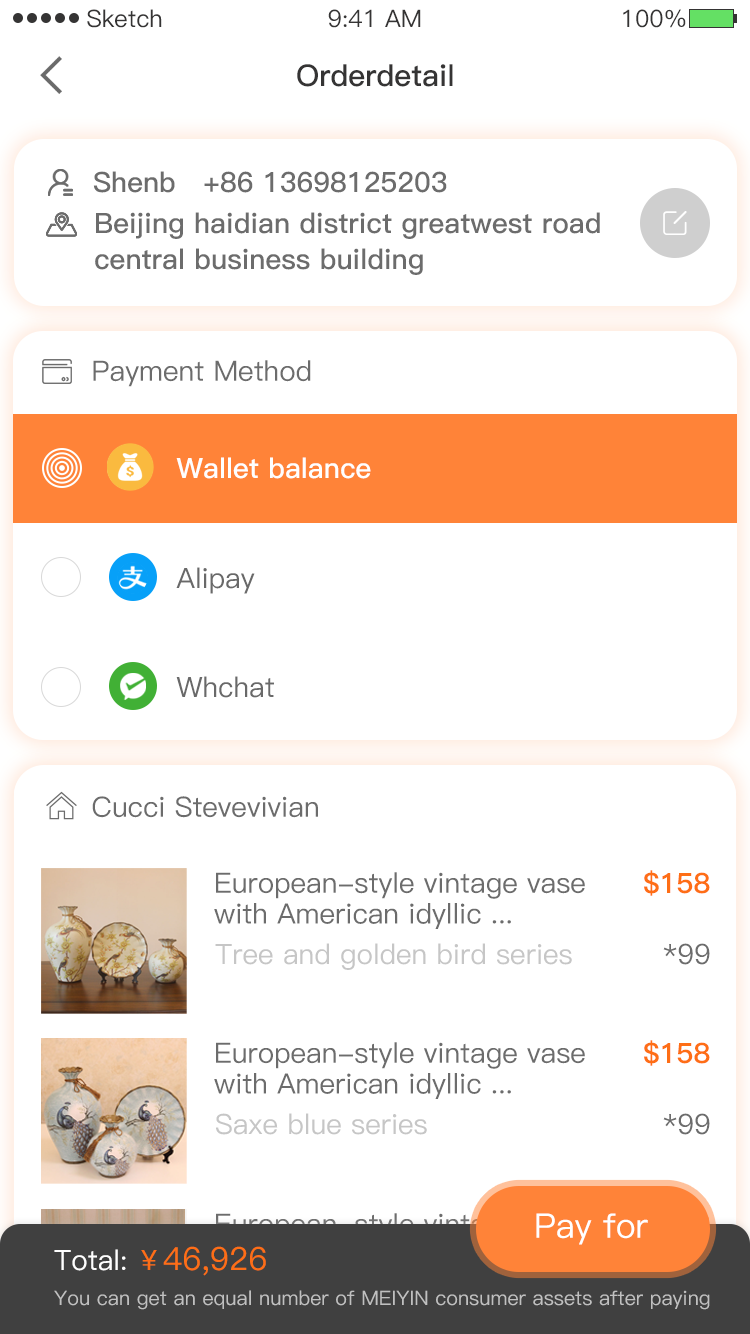
<style>
.page{position:relative;width:750px;height:1334px;background:#ffffff}
.page>*{position:absolute;margin:0}
.t1{font:24px "PingFang-SC-Medium";color:#353434}
.t2{font:30px "PingFang-SC-Bold";color:#353434}
.t3{font:28px "PingFang-SC-Bold";color:#6c6c6c}
.t4{font:28px/28px "PingFang-SC-Bold";color:#6c6c6c}
.t5{font:28px "PingFang-SC-Medium";color:#6c6c6c}
.t6{font:28px "PingFang-SC-Bold";color:#fefefe}
.t7{font:28px "PingFang-SC-Medium";color:#696969}
.t8{font:28px "PingFang-SC-Heavy";color:#fe6e16}
.t9{font:28px/22.8px "PingFang-SC-Medium";color:#6c6c6c}
.t10{font:28px "PingFang-SC-Medium";color:#c6c6c6}
.t11{font:34px "PingFang-SC-Medium";color:#ffffff}
.t12{font:28px "PingFang-SC-Medium";color:#ffffff}
.t13{font:32px "PingFang-SC-Medium";color:#fe6e16}
.t14{font:28px "PingFang-SC-Medium";color:#fe6e16}
.t15{font:20px "PingFang-SC-Medium";color:#c0c0c0}
</style>
<div class="page">
<p class="t1" style="left:87px;top:9px;width:75px;height:19px">Sketch</p>
<p class="t1" style="left:328px;top:9px;width:93px;height:19px">9:41 AM</p>
<p class="t1" style="left:623px;top:9px;width:63px;height:19px">100%</p>
<p class="t2" style="left:297px;top:64px;width:156px;height:23px">Orderdetail</p>
<p class="t3" style="left:93px;top:171px;width:82px;height:22px">Shenb</p>
<p class="t3" style="left:204px;top:171px;width:243px;height:22px">+86 13698125203</p>
<p class="t4" style="left:95px;top:212px;width:505px;height:63px">Beijing haidian district greatwest road <br>central business building</p>
<p class="t5" style="left:93px;top:360px;width:218px;height:27px">Payment Method</p>
<p class="t6" style="left:176px;top:457px;width:195px;height:22px">Wallet balance</p>
<p class="t7" style="left:176px;top:567px;width:79px;height:27px">Alipay</p>
<p class="t7" style="left:176px;top:676px;width:98px;height:22px">Whchat</p>
<p class="t5" style="left:92px;top:796px;width:226px;height:22px">Cucci Stevevivian</p>
<p class="t8" style="left:644px;top:870px;width:66px;height:26px">$158</p>
<p class="t9" style="left:214px;top:872px;width:371px;height:57px">European-style vintage vase<br>with American idyllic ...</p>
<p class="t10" style="left:215px;top:943px;width:357px;height:27px">Tree and golden bird series</p>
<p class="t5" style="left:663px;top:943px;width:47px;height:22px">*99</p>
<p class="t9" style="left:214px;top:1042px;width:371px;height:57px">European-style vintage vase<br>with American idyllic ...</p>
<p class="t8" style="left:644px;top:1040px;width:66px;height:26px">$158</p>
<p class="t10" style="left:216px;top:1113px;width:211px;height:22px">Saxe blue series</p>
<p class="t5" style="left:663px;top:1113px;width:47px;height:22px">*99</p>
<p class="t11" style="left:536px;top:1213px;width:112px;height:32px">Pay for</p>
<p class="t12" style="left:54px;top:1249px;width:72px;height:22px">Total:</p>
<p class="t13" style="left:141px;top:1246px;width:125px;height:30px"><span class="t14">￥</span>46,926</p>
<p class="t15" style="left:54px;top:1290px;width:656px;height:20px">You can get an equal number of MEIYIN consumer assets after paying</p>
</div>
